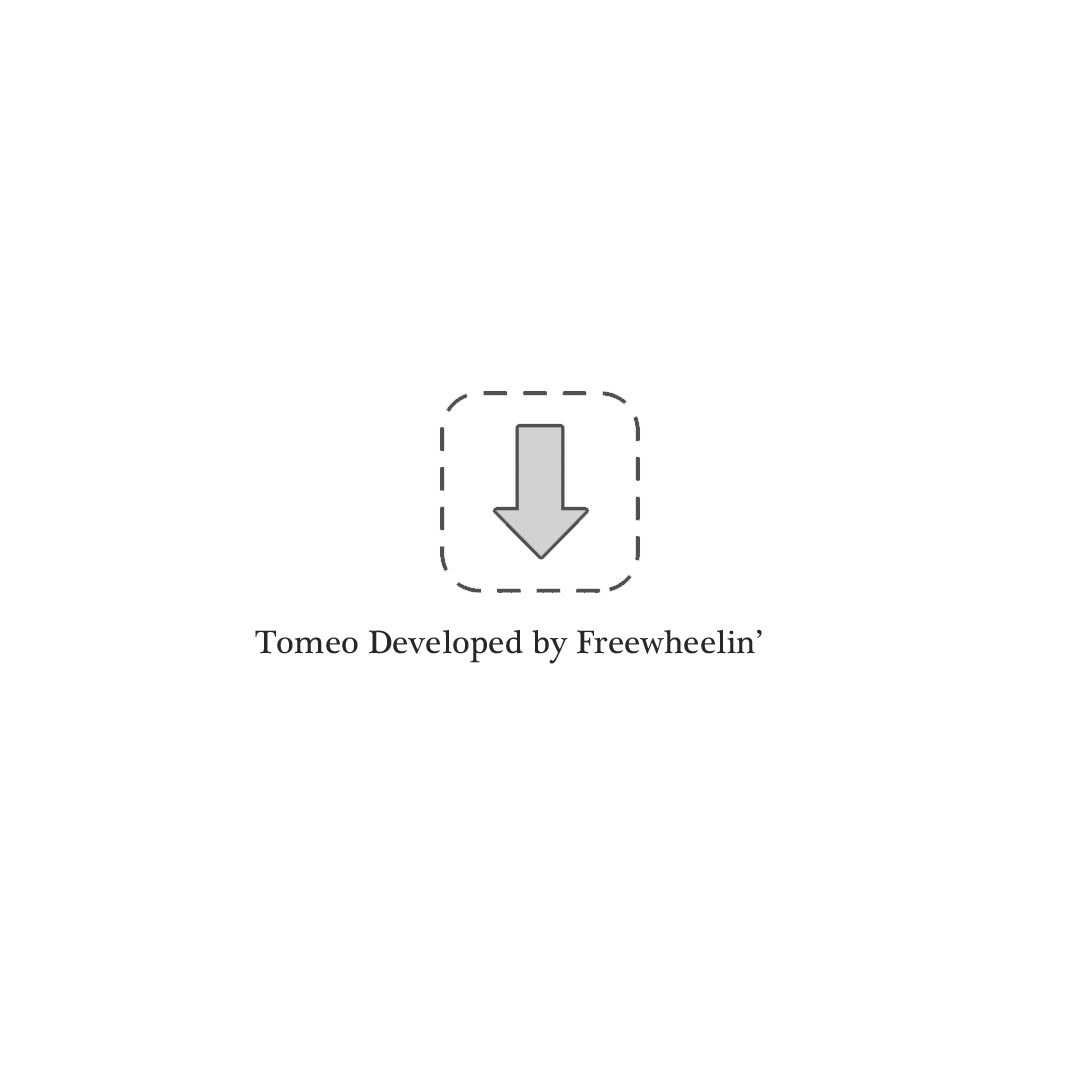
<style>
.page{position:relative;width:1080px;height:1080px;background:#ffffff}
.page>*{position:absolute;margin:0}
.t1{font:33.3px "PlantagenetCherokee";color:#272727}
</style>
<div class="page">
<p class="t1" style="left:255px;top:629px;width:507px;height:35px">Tomeo Developed by Freewheelin’</p>
</div>
